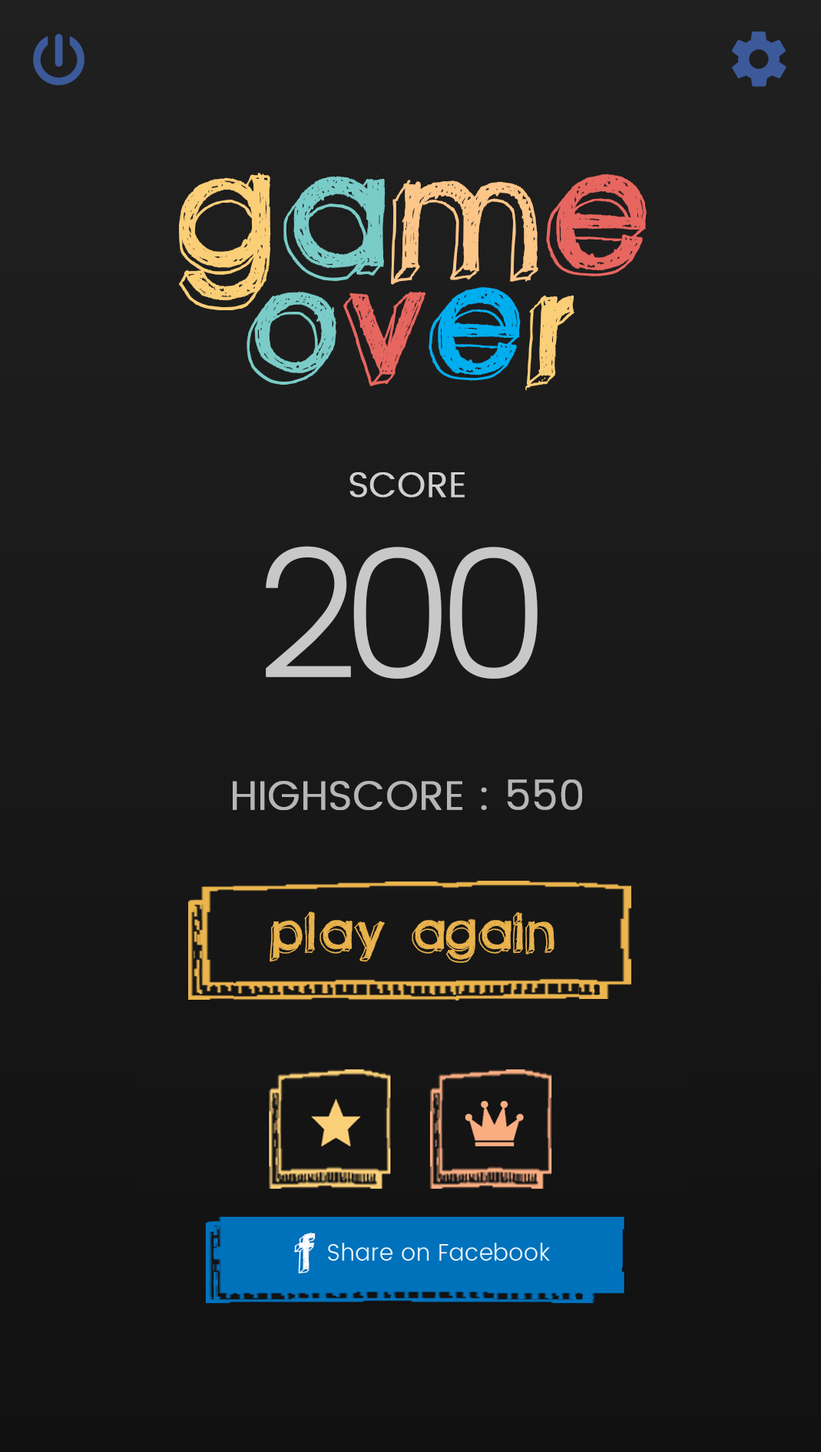
<style>
.page{position:relative;width:821px;height:1452px}
.page>*{position:absolute;margin:0}
.t1{font:232.2px/104.9px "Greenpiloww";color:#fbcf78;text-transform:uppercase}
.t2{font:232.2px/104.9px "Greenpiloww";color:#7accc8;text-transform:uppercase}
.t3{font:232.2px/104.9px "Greenpiloww";color:#fdc689;text-transform:uppercase}
.t4{font:232.2px/104.9px "Greenpiloww";color:#e76660;text-transform:uppercase}
.t5{font:211.9px/104.9px "Greenpiloww";color:#7accc8;text-transform:uppercase}
.t6{font:211.9px/104.9px "Greenpiloww";color:#e76660;text-transform:uppercase}
.t7{font:211.9px/104.9px "Greenpiloww";color:#00aeef;text-transform:uppercase}
.t8{font:211.9px/104.9px "Greenpiloww";color:#fbcf78;text-transform:uppercase}
.t9{font:35.3px "Poppins-Light";color:#d0d0d0;text-transform:uppercase;font-weight:bold}
.t10{font:179.7px "Poppins-Light";letter-spacing:-0.1em;color:#c8c8c8;text-transform:uppercase}
.t11{font:40.7px "Poppins-Light";color:#b6b6b6;text-transform:uppercase;font-weight:bold}
.t12{font:73.5px "Greenpiloww";color:#ebb44d;text-transform:uppercase}
</style>
<div class="page">
<p class="t1" style="left:179px;top:172px;width:468px;height:219px;text-align:center">G<span class="t2">a</span><span class="t3">m</span><span class="t4">e<br></span><span class="t5">o</span><span class="t6">v</span><span class="t7">e</span><span class="t8">r</span></p>
<p class="t9" style="left:349px;top:472px;width:116px;height:26px">score</p>
<p class="t10" style="left:266px;top:546px;width:272px;height:133px">200</p>
<p class="t11" style="left:233px;top:780px;width:349px;height:30px">highscore : 550</p>
<p class="t12" style="left:270px;top:912px;width:285px;height:51px">play again</p>
</div>
